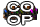
<style>
.page{position:relative;width:40px;height:27px;background:#ffffff}
.page>*{position:absolute;margin:0}
.t1{font:12px "ArialMT";color:#ffffff;font-weight:bold;scale:1.49 1}
</style>
<div class="page">
<p class="t1" style="left:7px;top:2px;width:27px;height:10px">CO</p>
<p class="t1" style="left:7px;top:15px;width:26px;height:10px">OP</p>
</div>
